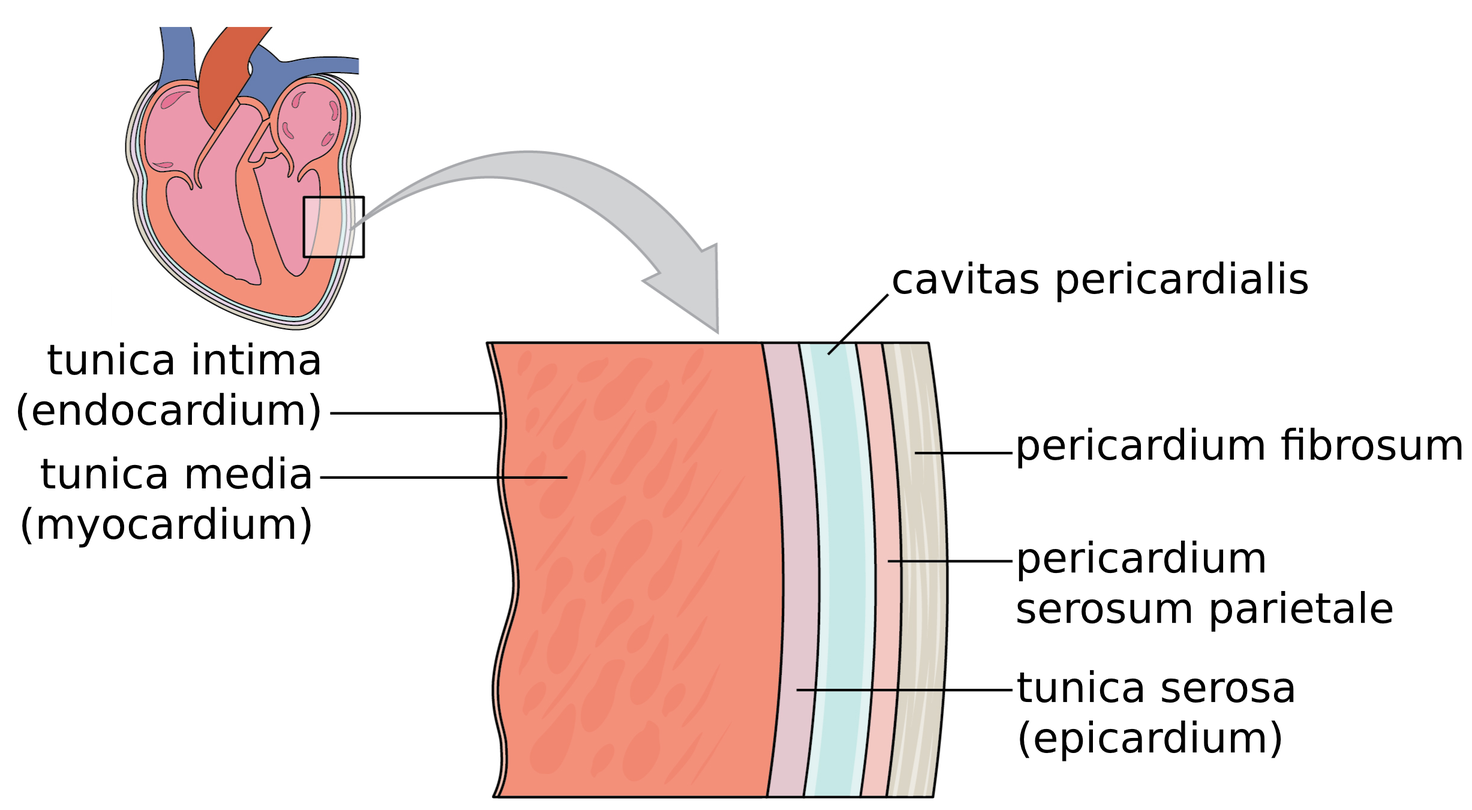
<style>
.page{position:relative;width:1472px;height:810px;background:#ffffff}
.page>*{position:absolute;margin:0}
.t1{font:42px "Arial";color:#000000}
</style>
<div class="page">
<p class="t1" style="left:893px;top:261px;width:415px;height:41px">cavitas pericardialis</p>
<p class="t1" style="left:17px;top:342px;width:303px;height:89px;text-align:right">tunica intima<br>(endocardium)</p>
<p class="t1" style="left:1018px;top:427px;width:444px;height:42px">pericardium fibrosum</p>
<p class="t1" style="left:22px;top:456px;width:289px;height:92px;text-align:right">tunica media<br>(myocardium)</p>
<p class="t1" style="left:1018px;top:540px;width:375px;height:92px">pericardium <br>serosum parietale</p>
<p class="t1" style="left:1018px;top:670px;width:276px;height:91px">tunica serosa<br>(epicardium)</p>
</div>
